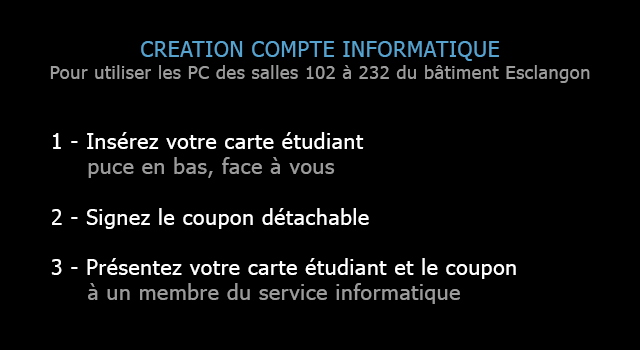
<style>
.page{position:relative;width:640px;height:350px;background:#000000}
.page>*{position:absolute;margin:0}
.t1{font:18px "Tahoma";letter-spacing:0.035em;color:#9c9c9c}
.t2{font:21px "Tahoma";letter-spacing:0.035em;color:#56a3d0}
.t3{font:21px "Tahoma";letter-spacing:0.035em;color:#ffffff}
.t4{font:21px "Tahoma";letter-spacing:0.035em;color:#9b9b9b}
</style>
<div class="page">
<p class="t1" style="left:50px;top:41px;width:540px;height:42px;text-align:center"><span class="t2">CREATION COMPTE INFORMATIQUE<br></span>Pour utiliser les PC des salles 102 à 232 du bâtiment Esclangon</p>
<p class="t3" style="left:51px;top:132px;width:465px;height:172px">1 - Insérez votre carte étudiant<br><span class="t4">     puce en bas, face à vous<br></span><br>2 - Signez le coupon détachable<br><br>3 - Présentez votre carte étudiant et le coupon<br><span class="t4">     à un membre du service informatique</span></p>
</div>
